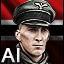
<style>
.page{position:relative;width:64px;height:64px}
.page>*{position:absolute;margin:0}
.t1{font:21.8px "Raavi";color:#ffffff;font-weight:bold}
</style>
<div class="page">
<p class="t1" style="left:1px;top:48px;width:19px;height:15px">AI</p>
</div>
